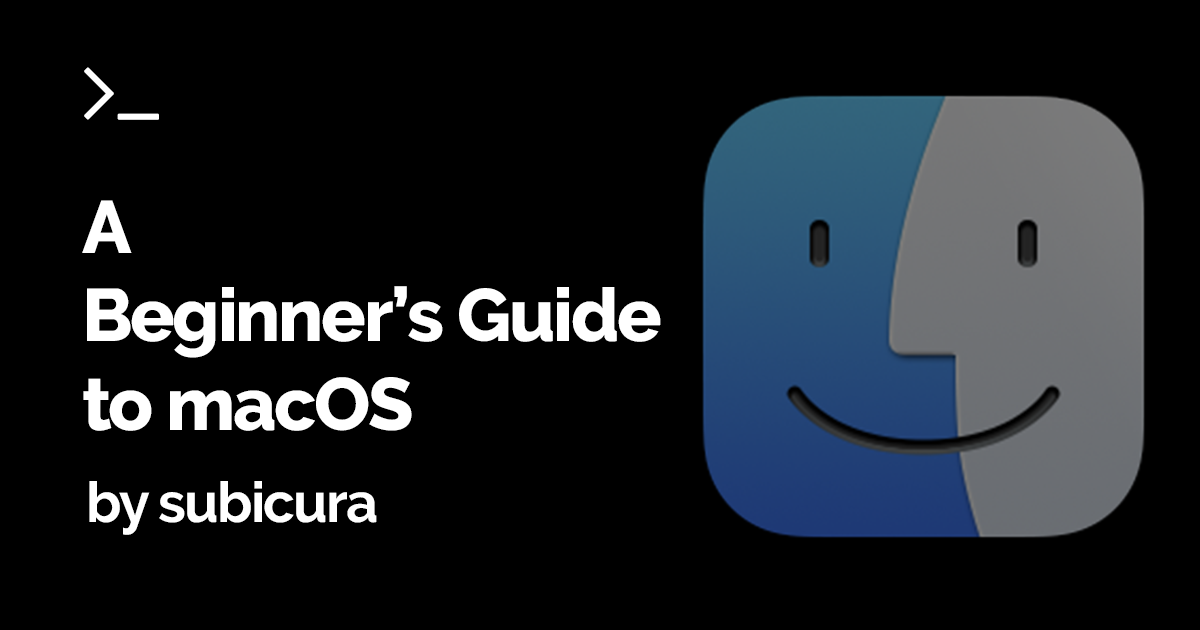
<style>
.page{position:relative;width:1200px;height:630px;background:#000000}
.page>*{position:absolute;margin:0}
.t1{font:74px "Raleway-ExtraBold";letter-spacing:-0.03em;color:#ffffff}
.t2{font:56px "Raleway-Bold";letter-spacing:-0.03em;color:#ffffff}
</style>
<div class="page">
<p class="t1" style="left:82px;top:200px;width:579px;height:231px">A<br>Beginner’s Guide<br>to macOS</p>
<p class="t2" style="left:89px;top:481px;width:288px;height:54px">by subicura</p>
</div>
